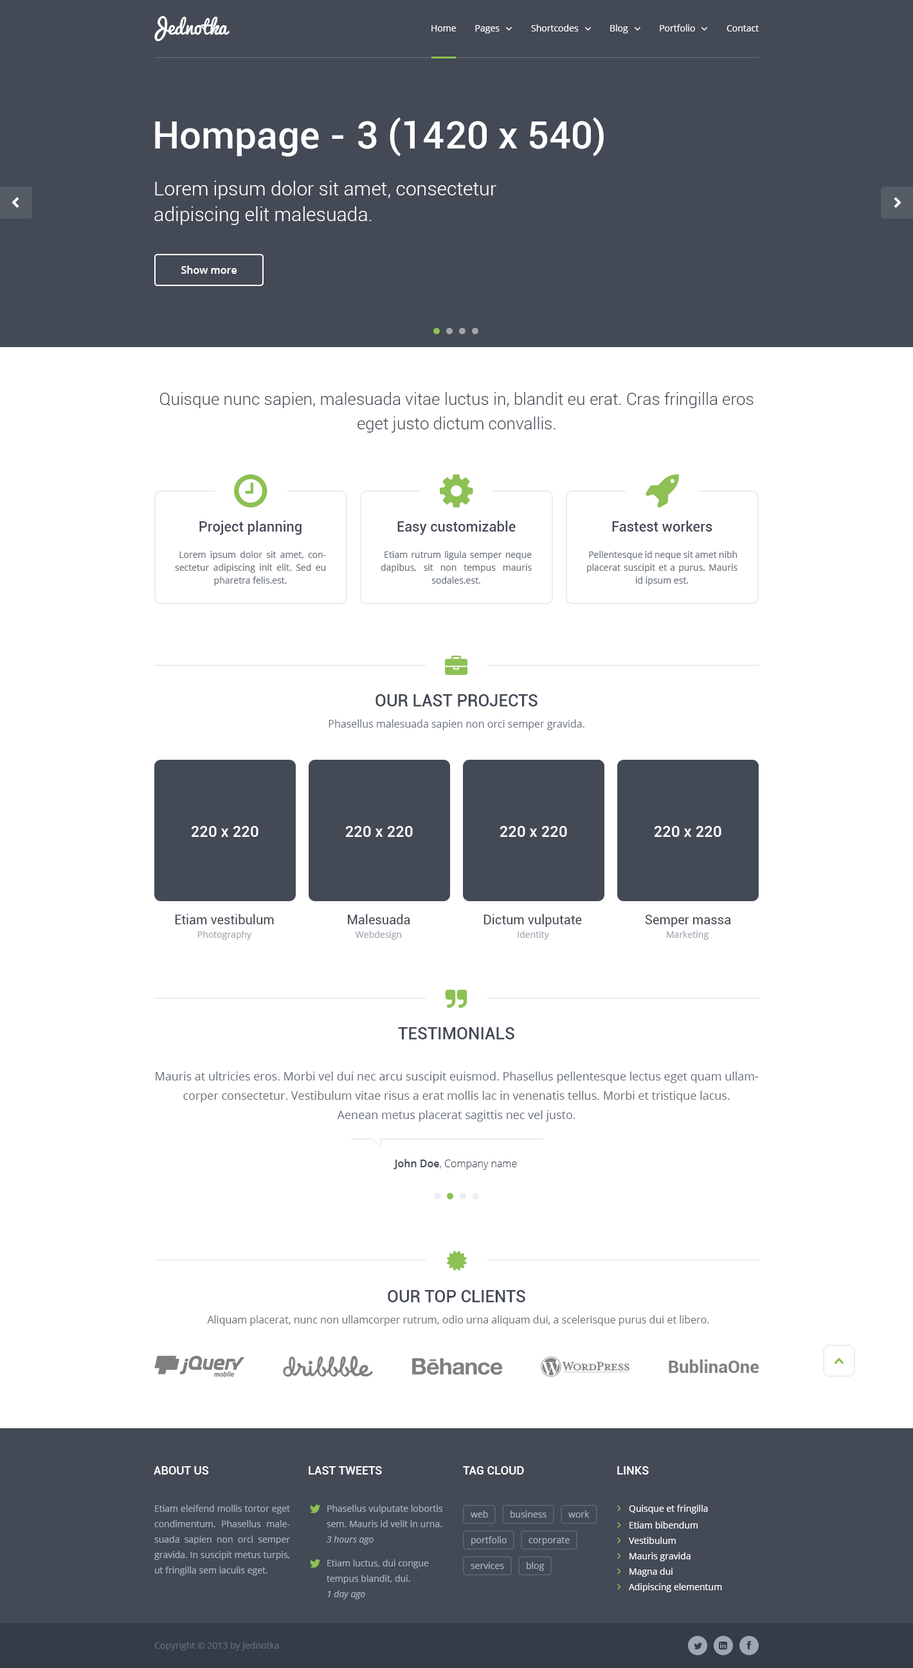
<style>
.page{position:relative;width:913px;height:1668px;background:#ffffff}
.page>*{position:absolute;margin:0}
.t1{font:19.3px "Pacifico";color:#ffffff}
.t2{font:9px "OpenSans";color:#ffffff}
.t3{font:38.6px "Roboto-Medium";color:#ffffff}
.t4{font:19.3px/25.7px "Roboto-Light";color:#ffffff}
.t5{font:10.3px "OpenSans-Semibold";color:#ffffff}
.t6{font:16.7px/24.4px "Roboto-Light";color:#434955}
.t7{font:14.1px "Roboto-Medium";color:#434955}
.t8{font:9px/12.9px "OpenSans";color:#676f7a}
.t9{font:9px/15.4px "OpenSans";color:#676f7a}
.t10{font:9px/15.4px "OpenSans";color:#9ca4af}
.t11{font:16.7px "Roboto-Medium";color:#434955;text-transform:uppercase}
.t12{font:10.3px "OpenSans";color:#676f7a}
.t13{font:15.4px "Roboto-Medium";color:#ffffff}
.t14{font:12.9px "Roboto-Regular";color:#434955}
.t15{font:9px "OpenSans";color:#9ca4af}
.t16{font:11.6px/19.3px "OpenSans";color:#676f7a}
.t17{font:10.3px "OpenSans-Light";color:#434955}
.t18{font:10.3px "OpenSans-Semibold";color:#434955}
.t19{font:11.6px "Roboto-Medium";color:#ffffff;text-transform:uppercase}
.t20{font:9px/15.4px "OpenSans";color:#aab2bd}
.t21{font:9px "OpenSans";color:#aab2bd}
.t22{font:9px "OpenSans-Italic";color:#aab2bd}
.t23{font:9px "OpenSans";color:#656d78}
</style>
<div class="page">
<p class="t1" style="left:154px;top:16px;width:76px;height:25px">Jednotka</p>
<p class="t2" style="left:431px;top:25px;width:25px;height:7px">Home</p>
<p class="t2" style="left:475px;top:25px;width:25px;height:8px">Pages</p>
<p class="t2" style="left:531px;top:24px;width:48px;height:8px">Shortcodes</p>
<p class="t2" style="left:610px;top:24px;width:18px;height:9px">Blog</p>
<p class="t2" style="left:660px;top:24px;width:35px;height:8px">Portfolio</p>
<p class="t2" style="left:726px;top:25px;width:33px;height:7px">Contact</p>
<p class="t3" style="left:155px;top:117px;width:449px;height:40px">Hompage - 3 (1420 x 540)</p>
<p class="t4" style="left:154px;top:181px;width:342px;height:44px">Lorem ipsum dolor sit amet, consectetur adipiscing elit malesuada.</p>
<p class="t5" style="left:181px;top:266px;width:56px;height:8px">Show more</p>
<p class="t6" style="left:160px;top:392px;width:593px;height:41px;text-align:center">Quisque nunc sapien, malesuada vitae luctus in, blandit eu erat. Cras fringilla eros eget justo dictum convallis.</p>
<p class="t7" style="left:199px;top:521px;width:103px;height:14px">Project planning</p>
<p class="t7" style="left:397px;top:521px;width:119px;height:14px">Easy customizable</p>
<p class="t7" style="left:612px;top:521px;width:100px;height:11px">Fastest workers</p>
<p class="t8" style="left:175px;top:551px;width:151px;height:35px;text-align:justify"><span class="t9"> </span>Lorem ipsum dolor sit amet, consectetur adipiscing init elit. Sed eu pharetra felis.est.</p>
<p class="t8" style="left:381px;top:551px;width:151px;height:33px;text-align:justify"><span class="t10"> </span>Etiam rutrum ligula semper neque dapibus, sit non tempus mauris sodales.est.</p>
<p class="t8" style="left:587px;top:551px;width:150px;height:35px;text-align:justify"><span class="t10"> </span>Pellentesque id neque sit amet nibh placerat suscipit et a purus. Mauris id ipsum est.</p>
<p class="t11" style="left:375px;top:694px;width:162px;height:12px">Our last projects</p>
<p class="t12" style="left:328px;top:719px;width:256px;height:11px">Phasellus malesuada sapien non orci semper gravida.</p>
<p class="t13" style="left:191px;top:826px;width:67px;height:11px">220 x 220</p>
<p class="t13" style="left:345px;top:826px;width:68px;height:11px">220 x 220</p>
<p class="t13" style="left:500px;top:826px;width:67px;height:11px">220 x 220</p>
<p class="t13" style="left:654px;top:826px;width:67px;height:11px">220 x 220</p>
<p class="t14" style="left:175px;top:914px;width:99px;height:10px">Etiam vestibulum</p>
<p class="t14" style="left:348px;top:914px;width:62px;height:10px">Malesuada</p>
<p class="t14" style="left:483px;top:914px;width:99px;height:13px">Dictum vulputate</p>
<p class="t14" style="left:645px;top:915px;width:86px;height:12px">Semper massa</p>
<p class="t15" style="left:198px;top:931px;width:54px;height:9px">Photography</p>
<p class="t15" style="left:355px;top:931px;width:47px;height:9px">Webdesign</p>
<p class="t15" style="left:518px;top:931px;width:31px;height:9px">Identity</p>
<p class="t15" style="left:667px;top:931px;width:41px;height:9px">Marketing</p>
<p class="t11" style="left:398px;top:1027px;width:116px;height:13px">Testimonials</p>
<p class="t16" style="left:156px;top:1072px;width:603px;height:50px;text-align:center">Mauris at ultricies eros. Morbi vel dui nec arcu suscipit euismod. Phasellus pellentesque lectus eget quam ullamcorper consectetur. Vestibulum vitae risus a erat mollis lac in venenatis tellus. Morbi et tristique lacus. <br>Aenean metus placerat sagittis nec vel justo.</p>
<p class="t17" style="left:393px;top:1159px;width:124px;height:11px"><span class="t18">John Doe</span>, Company name</p>
<p class="t11" style="left:388px;top:1290px;width:137px;height:12px">Our top clients</p>
<p class="t12" style="left:207px;top:1315px;width:502px;height:11px">Aliquam placerat, nunc non ullamcorper rutrum, odio urna aliquam dui, a scelerisque purus dui et libero.</p>
<p class="t19" style="left:154px;top:1466px;width:55px;height:9px">About us</p>
<p class="t19" style="left:309px;top:1466px;width:73px;height:9px">Last tweets</p>
<p class="t19" style="left:463px;top:1466px;width:61px;height:9px">Tag cloud</p>
<p class="t19" style="left:617px;top:1466px;width:32px;height:9px">Links</p>
<p class="t20" style="left:154px;top:1505px;width:136px;height:71px;text-align:justify">Etiam eleifend mollis tortor eget condimentum. Phasellus malesuada sapien non orci semper gravida. In suscipit metus turpis, ut fringilla sem iaculis eget.</p>
<p class="t20" style="left:327px;top:1505px;width:116px;height:22px">Phasellus vulputate lobortis sem. Mauris id velit in urna.</p>
<p class="t2" style="left:629px;top:1505px;width:79px;height:9px">Quisque et fringilla</p>
<p class="t21" style="left:471px;top:1511px;width:17px;height:7px">web</p>
<p class="t21" style="left:510px;top:1511px;width:36px;height:7px">business</p>
<p class="t21" style="left:568px;top:1511px;width:22px;height:7px">work</p>
<p class="t2" style="left:629px;top:1522px;width:69px;height:7px">Etiam bibendum</p>
<p class="t22" style="left:327px;top:1536px;width:47px;height:9px">3 hours ago</p>
<p class="t21" style="left:471px;top:1536px;width:36px;height:9px">portfolio</p>
<p class="t21" style="left:528px;top:1537px;width:42px;height:8px">corporate</p>
<p class="t2" style="left:629px;top:1537px;width:47px;height:7px">Vestibulum</p>
<p class="t2" style="left:629px;top:1553px;width:61px;height:9px">Mauris gravida</p>
<p class="t20" style="left:327px;top:1560px;width:102px;height:24px">Etiam luctus, dui congue tempus blandit, dui.</p>
<p class="t21" style="left:471px;top:1562px;width:33px;height:7px">services</p>
<p class="t21" style="left:526px;top:1562px;width:18px;height:9px">blog</p>
<p class="t2" style="left:629px;top:1568px;width:43px;height:9px">Magna dui</p>
<p class="t2" style="left:629px;top:1583px;width:93px;height:9px">Adipiscing elementum</p>
<p class="t22" style="left:328px;top:1590px;width:37px;height:9px">1 day ago</p>
<p class="t23" style="left:154px;top:1642px;width:125px;height:9px">Copyright © 2013 by Jednotka</p>
</div>
